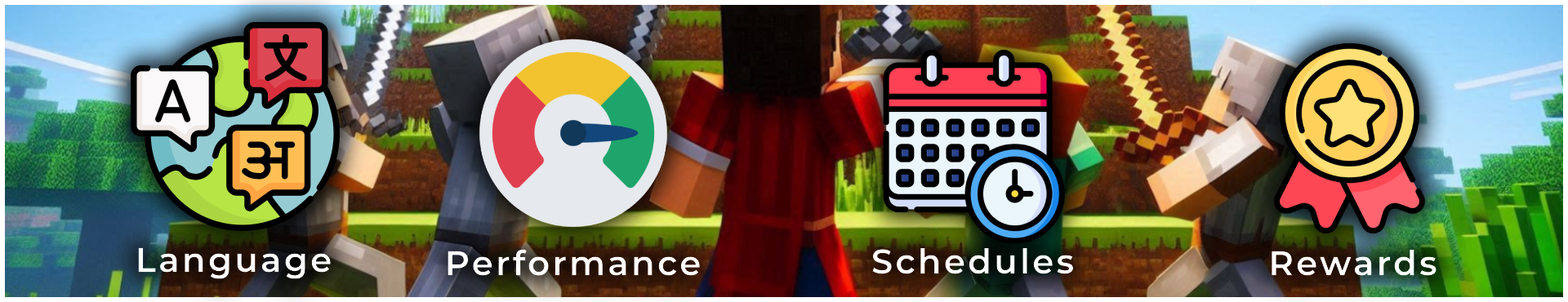
<style>
.page{position:relative;width:1568px;height:302px}
.page>*{position:absolute;margin:0}
.t1{font:34.3px "Montserrat-SemiBold";letter-spacing:0.075em;color:#ffffff}
</style>
<div class="page">
<p class="t1" style="left:138px;top:247px;width:193px;height:32px">Language</p>
<p class="t1" style="left:448px;top:249px;width:252px;height:27px">Performance</p>
<p class="t1" style="left:872px;top:248px;width:202px;height:26px">Schedules</p>
<p class="t1" style="left:1272px;top:250px;width:165px;height:26px">Rewards</p>
</div>
